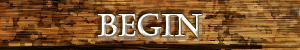
<style>
.page{position:relative;width:300px;height:50px}
.page>*{position:absolute;margin:0}
.t1{font:30px "Castellar";color:#ffffff;font-weight:bold}
</style>
<div class="page">
<p class="t1" style="left:97px;top:13px;width:105px;height:24px">Begin</p>
</div>
